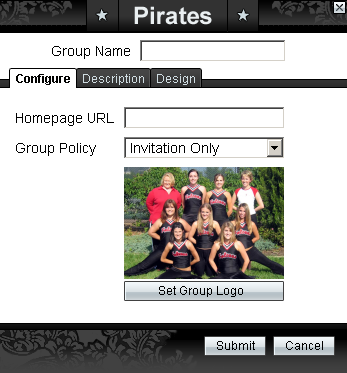
<style>
.page{position:relative;width:347px;height:373px;background:#ffffff}
.page>*{position:absolute;margin:0}
.t1{font:24px "Arial-BoldMT";color:#eaeff1}
.t2{font:40px "KonQaBlack";letter-spacing:-0.05em;color:#cfdce1}
.t3{font:14px "ArialMT";color:#000000}
.t4{font:12px "Arial-BoldMT";color:#010100}
.t5{font:12px "ArialMT";color:#cfdce1}
.t6{font:12px "ArialMT";color:#000000}
</style>
<div class="page">
<p class="t1" style="left:134px;top:6px;width:78px;height:19px">Pirates</p>
<p class="t2" style="left:96px;top:9px;width:12px;height:12px;rotate:-5deg">*</p>
<p class="t2" style="left:237px;top:9px;width:12px;height:13px;rotate:5deg">*</p>
<p class="t3" style="left:52px;top:46px;width:78px;height:13px">Group Name</p>
<p class="t4" style="left:16px;top:74px;width:54px;height:11px">Configure</p>
<p class="t5" style="left:83px;top:74px;width:61px;height:11px">Description</p>
<p class="t5" style="left:157px;top:74px;width:38px;height:11px">Design</p>
<p class="t3" style="left:16px;top:113px;width:98px;height:13px">Homepage URL</p>
<p class="t3" style="left:16px;top:143px;width:80px;height:13px">Group Policy</p>
<p class="t3" style="left:131px;top:143px;width:88px;height:13px">Invitation Only</p>
<p class="t6" style="left:159px;top:286px;width:84px;height:11px">Set Group Logo</p>
<p class="t6" style="left:217px;top:341px;width:38px;height:9px">Submit</p>
<p class="t6" style="left:286px;top:341px;width:37px;height:9px">Cancel</p>
</div>
